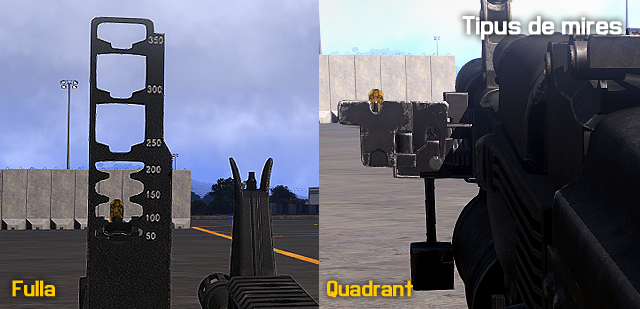
<style>
.page{position:relative;width:640px;height:309px}
.page>*{position:absolute;margin:0}
.t1{font:26.2px "MilestoneOne";color:#ffffff;font-weight:bold;scale:1.11 1}
.t2{font:22.5px "MilestoneOne";color:#ffcb00;font-weight:bold;scale:1.11 1}
</style>
<div class="page">
<p class="t1" style="left:462px;top:16px;width:160px;height:24px">Tipus de mires</p>
<p class="t2" style="left:12px;top:280px;width:43px;height:17px">Fulla</p>
<p class="t2" style="left:327px;top:280px;width:86px;height:18px">Quadrant</p>
</div>
